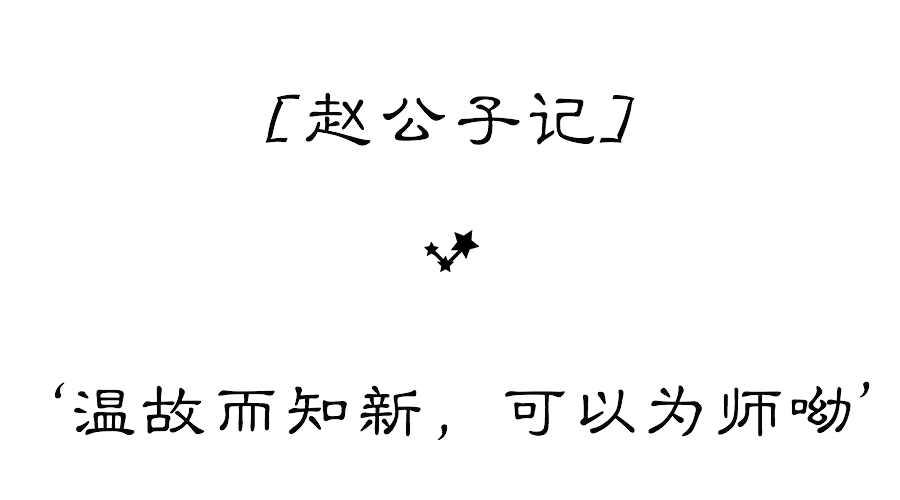
<style>
.page{position:relative;width:900px;height:500px;background:#ffffff}
.page>*{position:absolute;margin:0}
.t1{font:74.5px "STLibianSC-Regular";color:#060606}
.t2{font:72px "STLibianSC-Regular";color:#060606}
</style>
<div class="page">
<p class="t1" style="left:265px;top:93px;width:370px;height:53px">[赵公子记]</p>
<p class="t2" style="left:54px;top:381px;width:816px;height:60px">‘温故而知新，可以为师呦’</p>
</div>
